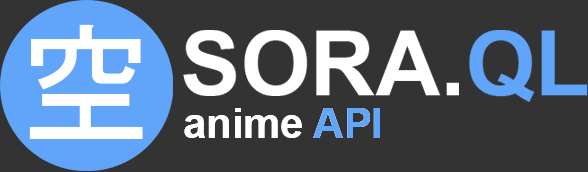
<style>
.page{position:relative;width:588px;height:172px;background:#333333}
.page>*{position:absolute;margin:0}
.t1{font:130px "MS-Gothic";color:#ffffff}
.t2{font:41.7px "Arial-BoldMT"}
</style>
<div class="page">
<p class="t1" style="left:29px;top:24px;width:114px;height:115px">空</p>
<p class="t2" style="left:184px;top:108px;width:196px;height:30px">anime API</p>
</div>
